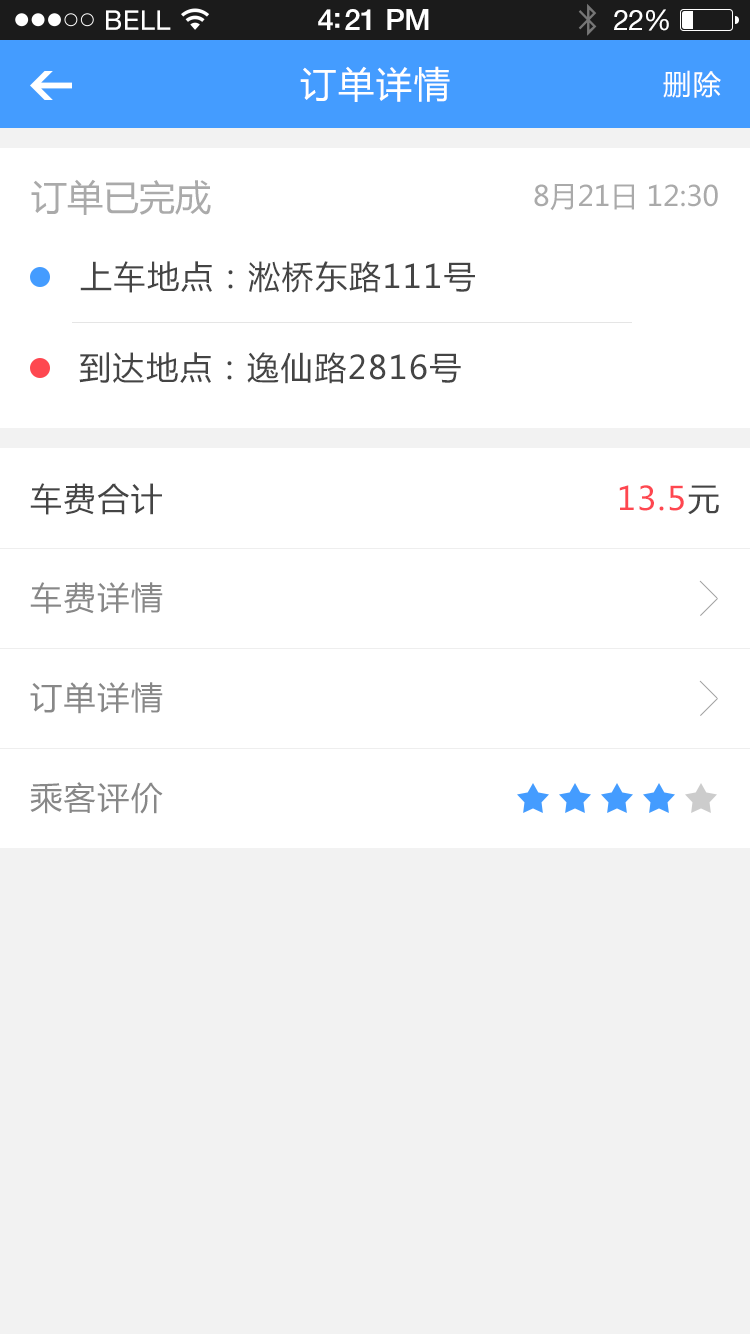
<style>
.page{position:relative;width:750px;height:1334px;background:#ffffff}
.page>*{position:absolute;margin:0}
.t1{font:36px "MicrosoftYaHei";letter-spacing:0.05em;color:#ffffff}
.t2{font:28px "MicrosoftYaHei";letter-spacing:0.05em;color:#ffffff}
.t3{font:36px "MicrosoftYaHei";color:#aaaaaa}
.t4{font:28px "MicrosoftYaHei";color:#aaaaaa}
.t5{font:32px "MicrosoftYaHei";letter-spacing:0.05em;color:#444444}
.t6{font:32px "MicrosoftYaHei";letter-spacing:0.05em;color:#fe4750}
.t7{font:32px "MicrosoftYaHei";letter-spacing:0.05em;color:#888888}
</style>
<div class="page">
<p class="t1" style="left:300px;top:66px;width:150px;height:36px">订单详情</p>
<p class="t2" style="left:663px;top:70px;width:58px;height:28px">删除</p>
<p class="t3" style="left:31px;top:179px;width:180px;height:36px">订单已完成</p>
<p class="t4" style="left:534px;top:184px;width:184px;height:27px">8月21日 12:30</p>
<p class="t5" style="left:80px;top:261px;width:395px;height:32px">上车地点：淞桥东路111号</p>
<p class="t5" style="left:79px;top:352px;width:382px;height:32px">到达地点：逸仙路2816号</p>
<p class="t5" style="left:30px;top:483px;width:132px;height:32px">车费合计</p>
<p class="t6" style="left:619px;top:485px;width:100px;height:30px">13.5<span class="t5">元</span></p>
<p class="t7" style="left:30px;top:582px;width:133px;height:32px">车费详情</p>
<p class="t7" style="left:30px;top:682px;width:133px;height:32px">订单详情</p>
<p class="t7" style="left:30px;top:782px;width:133px;height:32px">乘客评价</p>
</div>
